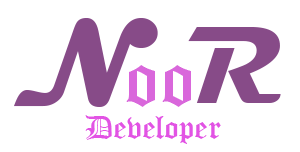
<style>
.page{position:relative;width:300px;height:152px;background:#ffffff}
.page>*{position:absolute;margin:0}
.t1{font:125.6px "Magneto-Bold";color:#874b88}
.t2{font:110.8px "Magneto-Bold";color:#874b88}
.t3{font:80px "OldEnglishTextMT";color:#d967db}
.t4{font:33.3px "OldEnglishTextMT";color:#e253e4}
</style>
<div class="page">
<p class="t1" style="left:14px;top:18px;width:144px;height:89px">N</p>
<p class="t2" style="left:188px;top:27px;width:93px;height:76px">R</p>
<p class="t3" style="left:126px;top:65px;width:65px;height:42px">oo</p>
<p class="t4" style="left:85px;top:115px;width:136px;height:29px">Developer</p>
</div>
